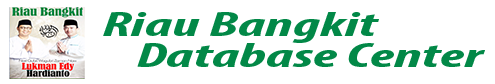
<style>
.page{position:relative;width:495px;height:84px;background:#ffffff}
.page>*{position:absolute;margin:0}
.t1{font:35px "MyriadPro-BoldCondIt";color:#028847;scale:1.81 1}
</style>
<div class="page">
<p class="t1" style="left:103px;top:12px;width:276px;height:31px">Riau Bangkit</p>
<p class="t1" style="left:137px;top:43px;width:348px;height:24px">Database Center</p>
</div>
